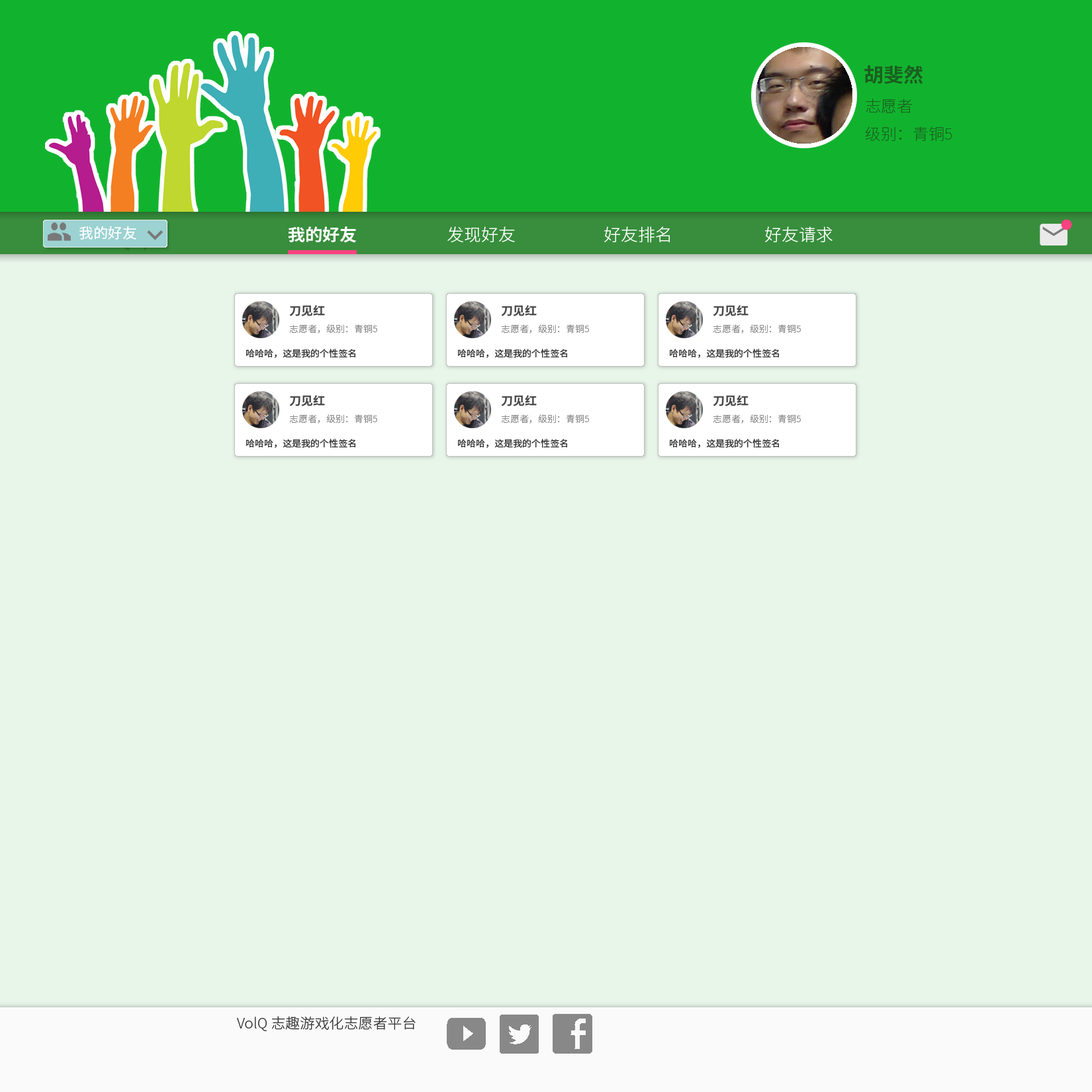
<style>
.page{position:relative;width:1092px;height:1092px;background:#e8f5e9}
.page>*{position:absolute;margin:0}
.t1{font:19.5px "NotoSansCJKsc-Bold";color:#1b5e20}
.t2{font:15.6px "NotoSansCJKsc-Thin";color:#1b5e20}
.t3{font:14.3px "NotoSansCJKsc-Regular";color:#ffffff}
.t4{font:16.9px "NotoSansCJKsc-Bold";color:#ffffff}
.t5{font:16.9px "NotoSansCJKsc-Light";color:#ffffff}
.t6{font:14.3px "NotoSansCJKsc-Light";color:#353535}
</style>
<div class="page">
<p class="t1" style="left:864px;top:65px;width:59px;height:19px">胡斐然</p>
<p class="t2" style="left:865px;top:99px;width:87px;height:42px">志愿者<br>级别：青铜5</p>
<p class="t3" style="left:79px;top:226px;width:57px;height:14px">我的好友</p>
<p class="t4" style="left:288px;top:226px;width:68px;height:17px">我的好友</p>
<p class="t5" style="left:447px;top:226px;width:68px;height:17px">发现好友</p>
<p class="t5" style="left:604px;top:226px;width:66px;height:17px">好友排名</p>
<p class="t5" style="left:765px;top:226px;width:68px;height:16px">好友请求</p>
<p class="t6" style="left:237px;top:1016px;width:179px;height:15px">VolQ 志趣游戏化志愿者平台</p>
</div>
